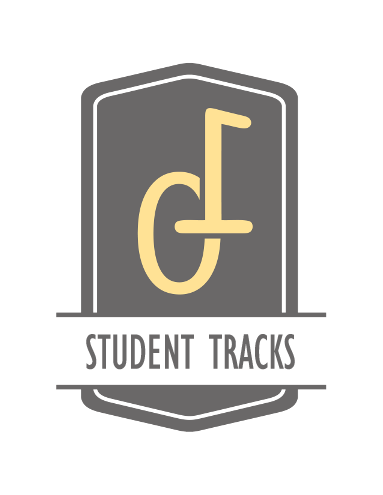
<style>
.page{position:relative;width:383px;height:495px;background:#ffffff}
.page>*{position:absolute;margin:0}
.t1{font:51.1px "GillSansMT-Condensed";color:#6a6868;scale:0.85 1}
</style>
<div class="page">
<p class="t1" style="left:86px;top:334px;width:209px;height:36px">STUDENT TRACKS</p>
</div>
